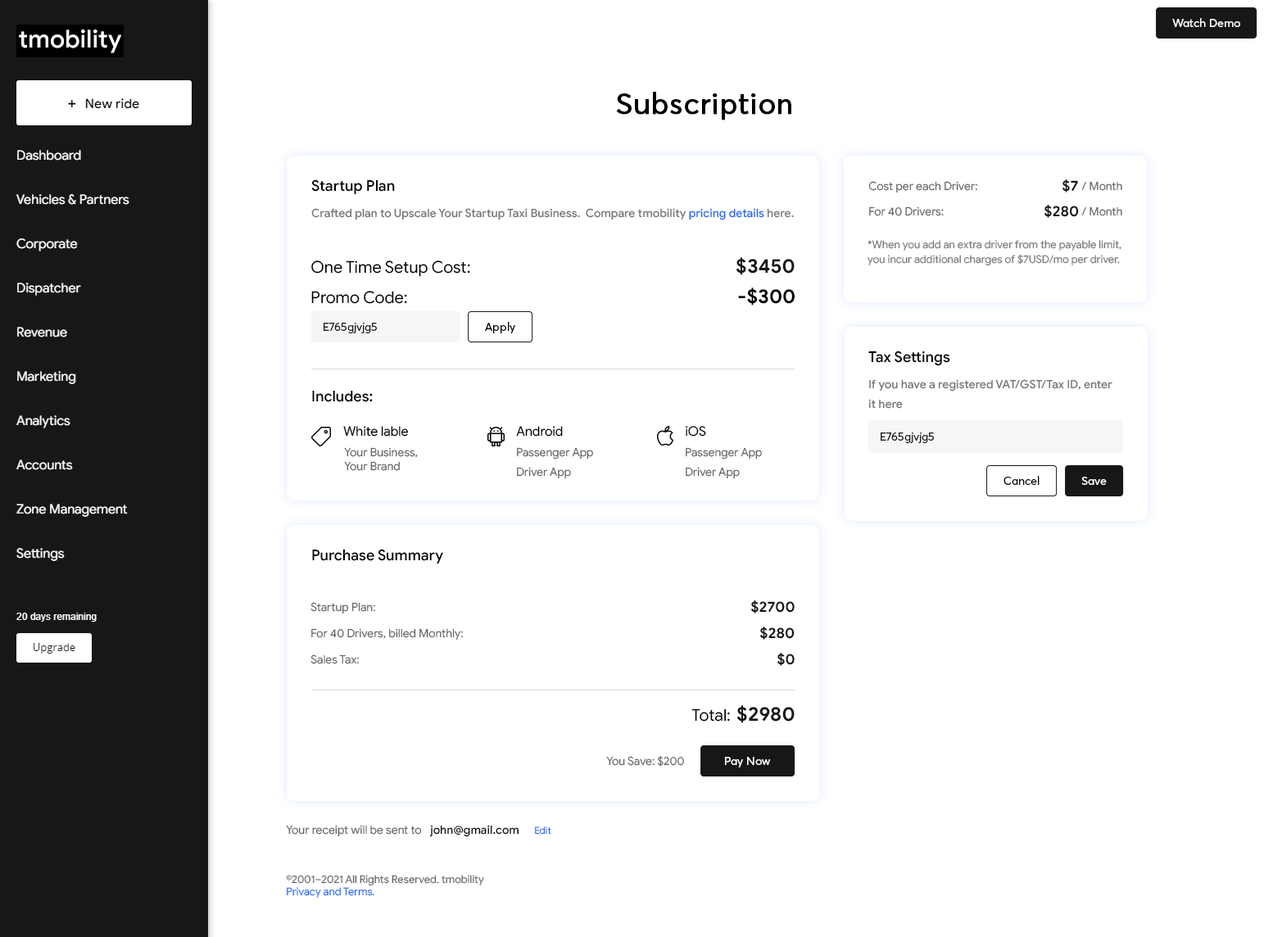
<style>
.page{position:relative;width:1273px;height:937px;background:#ffffff}
.page>*{position:absolute;margin:0}
.t1{font:11.5px "AvertaDemoPECuttedDemo-Regular";color:#fefefe}
.t2{font:29.5px "AvertaDemoPECuttedDemo-Regular";color:#000000;font-weight:bold}
.t3{font:14.7px "GoogleSans-Medium";color:#000000}
.t4{font:11.5px "GoogleSans-Regular";color:#666666}
.t5{font:14.7px "GoogleSans-Bold";color:#171717}
.t6{font:11.5px "GoogleSans-Medium";color:#777777}
.t7{font:11.5px "GoogleSans-Medium";color:#286ef2}
.t8{font:10.6px/14.7px "GoogleSans-Regular";color:#777777}
.t9{font:19.7px "GoogleSans-Bold";color:#171717}
.t10{font:16.4px "GoogleSans-Regular";color:#000000}
.t11{font:19.7px "GoogleSans-Bold";color:#000000}
.t12{font:11.5px "AvertaDemoPECuttedDemo-Regular";color:#1f1f1f}
.t13{font:11.5px "AvertaDemoPECuttedDemo-Regular";color:#000000}
.t14{font:11.5px/19.7px "GoogleSans-Medium";color:#777777}
.t15{font:13.1px "GoogleSans-Regular";color:#000000}
.t16{font:11.5px/19.7px "GoogleSans-Regular";color:#666666}
.t17{font:11.5px "AvertaDemoPECuttedDemo-Regular";color:#ffffff}
.t18{font:11.5px "GoogleSans-Medium";color:#171717}
.t19{font:9.8px "GoogleSans-Regular";color:#286ef2}
.t20{font:10.6px "GoogleSans-Regular";color:#666666}
.t21{font:10.6px "GoogleSans-Regular";color:#286ef2}
</style>
<div class="page">
<p class="t1" style="left:1172px;top:18px;width:68px;height:9px">Watch Demo</p>
<p class="t2" style="left:616px;top:92px;width:175px;height:28px">Subscription</p>
<p class="t3" style="left:311px;top:179px;width:84px;height:16px">Startup Plan</p>
<p class="t4" style="left:868px;top:181px;width:109px;height:12px">Cost per each Driver:</p>
<p class="t5" style="left:1061px;top:179px;width:17px;height:13px">$7</p>
<p class="t4" style="left:1081px;top:181px;width:41px;height:10px">/ Month</p>
<p class="t6" style="left:311px;top:208px;width:483px;height:12px">Crafted plan to Upscale Your Startup Taxi Business.  Compare tmobility <span class="t7">pricing details</span> here.</p>
<p class="t4" style="left:869px;top:206px;width:74px;height:10px">For 40 Drivers:</p>
<p class="t5" style="left:1043px;top:205px;width:36px;height:13px">$280</p>
<p class="t4" style="left:1081px;top:206px;width:41px;height:10px">/ Month</p>
<p class="t8" style="left:867px;top:240px;width:254px;height:26px">*When you add an extra driver from the payable limit, you incur additional charges of $7USD/mo per driver.</p>
<p class="t9" style="left:735px;top:257px;width:59px;height:18px">$3450</p>
<p class="t10" style="left:311px;top:260px;width:159px;height:17px">One Time Setup Cost:</p>
<p class="t10" style="left:311px;top:291px;width:96px;height:13px">Promo Code:</p>
<p class="t11" style="left:738px;top:287px;width:56px;height:18px">-$300</p>
<p class="t12" style="left:324px;top:322px;width:53px;height:11px">E765gjvjg5</p>
<p class="t13" style="left:485px;top:322px;width:30px;height:11px">Apply</p>
<p class="t3" style="left:868px;top:351px;width:82px;height:15px">Tax Settings</p>
<p class="t3" style="left:312px;top:390px;width:61px;height:12px">Includes:</p>
<p class="t14" style="left:868px;top:379px;width:244px;height:30px">If you have a registered VAT/GST/Tax ID, enter it here</p>
<p class="t15" style="left:343px;top:426px;width:66px;height:11px">White lable</p>
<p class="t15" style="left:516px;top:426px;width:47px;height:11px">Android</p>
<p class="t15" style="left:685px;top:426px;width:21px;height:11px">iOS</p>
<p class="t12" style="left:880px;top:432px;width:54px;height:11px">E765gjvjg5</p>
<p class="t4" style="left:344px;top:447px;width:74px;height:24px">Your Business,<br>Your Brand</p>
<p class="t16" style="left:517px;top:447px;width:76px;height:32px">Passenger App<br>Driver App</p>
<p class="t16" style="left:685px;top:447px;width:77px;height:32px">Passenger App<br>Driver App</p>
<p class="t13" style="left:1003px;top:476px;width:36px;height:9px">Cancel</p>
<p class="t17" style="left:1081px;top:477px;width:25px;height:8px">Save</p>
<p class="t3" style="left:312px;top:549px;width:131px;height:15px">Purchase Summary</p>
<p class="t4" style="left:310px;top:602px;width:65px;height:12px">Startup Plan:</p>
<p class="t5" style="left:750px;top:600px;width:44px;height:13px">$2700</p>
<p class="t4" style="left:311px;top:628px;width:152px;height:12px">For 40 Drivers, billed Monthly:</p>
<p class="t5" style="left:759px;top:627px;width:35px;height:13px">$280</p>
<p class="t5" style="left:776px;top:653px;width:18px;height:13px">$0</p>
<p class="t4" style="left:310px;top:654px;width:49px;height:10px">Sales Tax:</p>
<p class="t10" style="left:691px;top:708px;width:39px;height:14px">Total:</p>
<p class="t9" style="left:736px;top:705px;width:58px;height:18px">$2980</p>
<p class="t4" style="left:606px;top:755px;width:78px;height:12px">You Save: $200</p>
<p class="t1" style="left:725px;top:757px;width:46px;height:10px">Pay Now</p>
<p class="t4" style="left:286px;top:825px;width:136px;height:12px">Your receipt will be sent to</p>
<p class="t18" style="left:429px;top:825px;width:90px;height:12px">john@gmail.com</p>
<p class="t19" style="left:535px;top:826px;width:16px;height:9px">Edit</p>
<p class="t20" style="left:286px;top:875px;width:198px;height:23px">©2001–2021 All Rights Reserved. tmobility<br><span class="t21">Privacy and Terms.</span></p>
</div>
